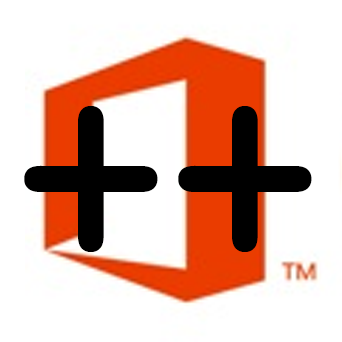
<style>
.page{position:relative;width:342px;height:342px;background:#ffffff}
.page>*{position:absolute;margin:0}
.t1{font:256px "CourierNewPS-BoldMT";color:#000000}
</style>
<div class="page">
<p class="t1" style="left:24px;top:106px;width:288px;height:146px">++</p>
</div>
